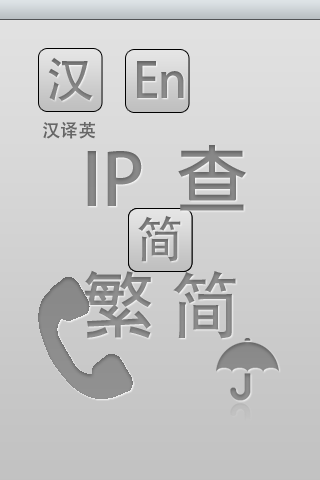
<style>
.page{position:relative;width:320px;height:480px}
.page>*{position:absolute;margin:0}
.t1{font:18px "AdobeHeitiStd-Regular";color:#666666}
.t2{font:72px "AdobeFanHeitiStd-Bold";color:#848484}
.t3{font:72px "AdobeHeitiStd-Regular";color:#848484}
</style>
<div class="page">
<p class="t1" style="left:43px;top:122px;width:52px;height:17px">汉译英</p>
<p class="t2" style="left:84px;top:145px;width:162px;height:194px">IP  查<br>繁 <span class="t3">简</span></p>
</div>
